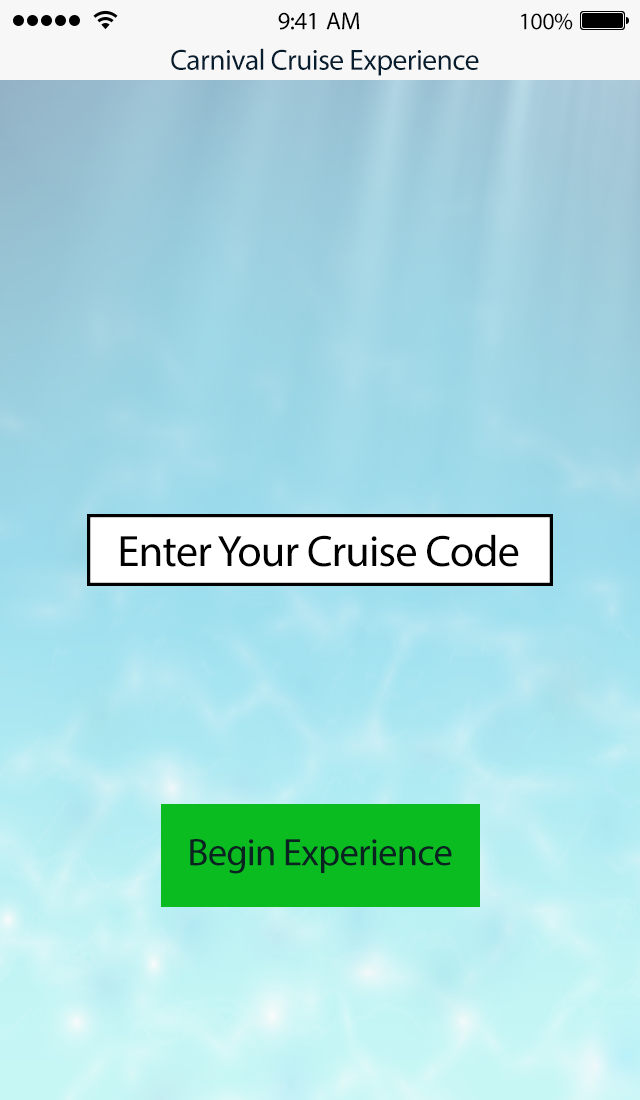
<style>
.page{position:relative;width:640px;height:1100px}
.page>*{position:absolute;margin:0}
.t1{font:25px "MyriadPro-Regular";letter-spacing:-0.02em;color:#000000}
.t2{font:24px "MyriadPro-Regular";letter-spacing:-0.02em;color:#000000}
.t3{font:29.4px "MyriadPro-Regular";letter-spacing:-0.02em;color:#061d30}
.t4{font:44.2px "MyriadPro-Regular";letter-spacing:-0.02em;color:#000000}
.t5{font:38.6px "MyriadPro-Regular";letter-spacing:-0.02em;color:#0a2320}
</style>
<div class="page">
<p class="t1" style="left:278px;top:12px;width:82px;height:18px">9:41 AM</p>
<p class="t2" style="left:521px;top:13px;width:52px;height:17px">100%</p>
<p class="t3" style="left:171px;top:48px;width:308px;height:28px">Carnival Cruise Experience</p>
<p class="t4" style="left:120px;top:534px;width:399px;height:33px">Enter Your Cruise Code</p>
<p class="t5" style="left:190px;top:839px;width:262px;height:35px">Begin Experience</p>
</div>
